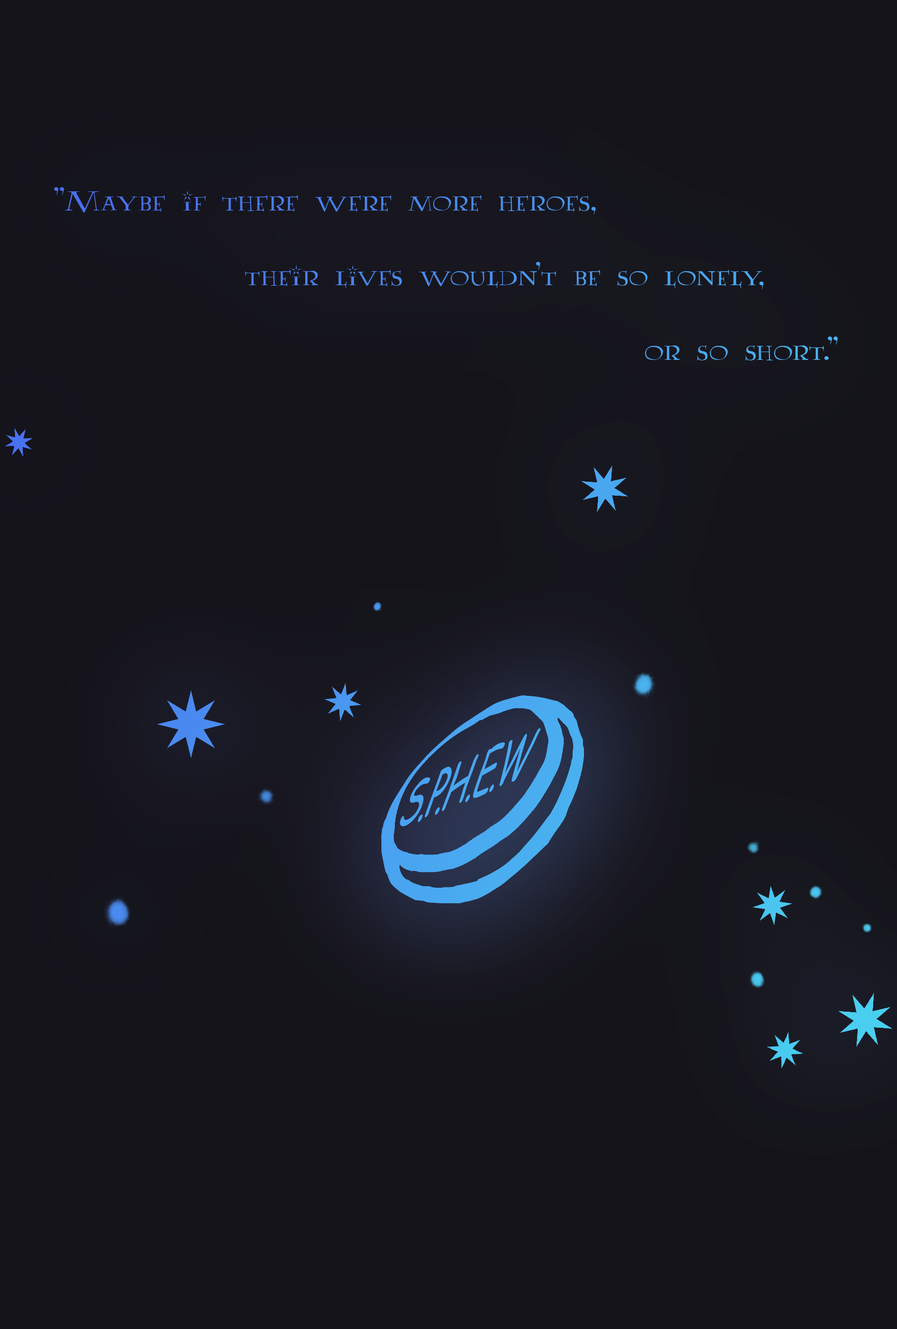
<style>
.page{position:relative;width:897px;height:1329px;background:#141319}
.page>*{position:absolute;margin:0}
.t1{font:31.1px "AA-Lumos-Caps"}
.t2{font:66.6px "ComicSansMS";letter-spacing:-0.05em;color:#49a6f0;scale:0.54 1}
</style>
<div class="page">
<p class="t1" style="left:54px;top:187px;width:784px;height:173px">"Maybe if there were more heroes, <br>      <br>            their lives wouldn't be so lonely, <br>                             <br>                                     or so short."</p>
<p class="t2" style="left:400px;top:728px;width:141px;height:98px;rotate:-23deg">S.P.H.E.W</p>
</div>
